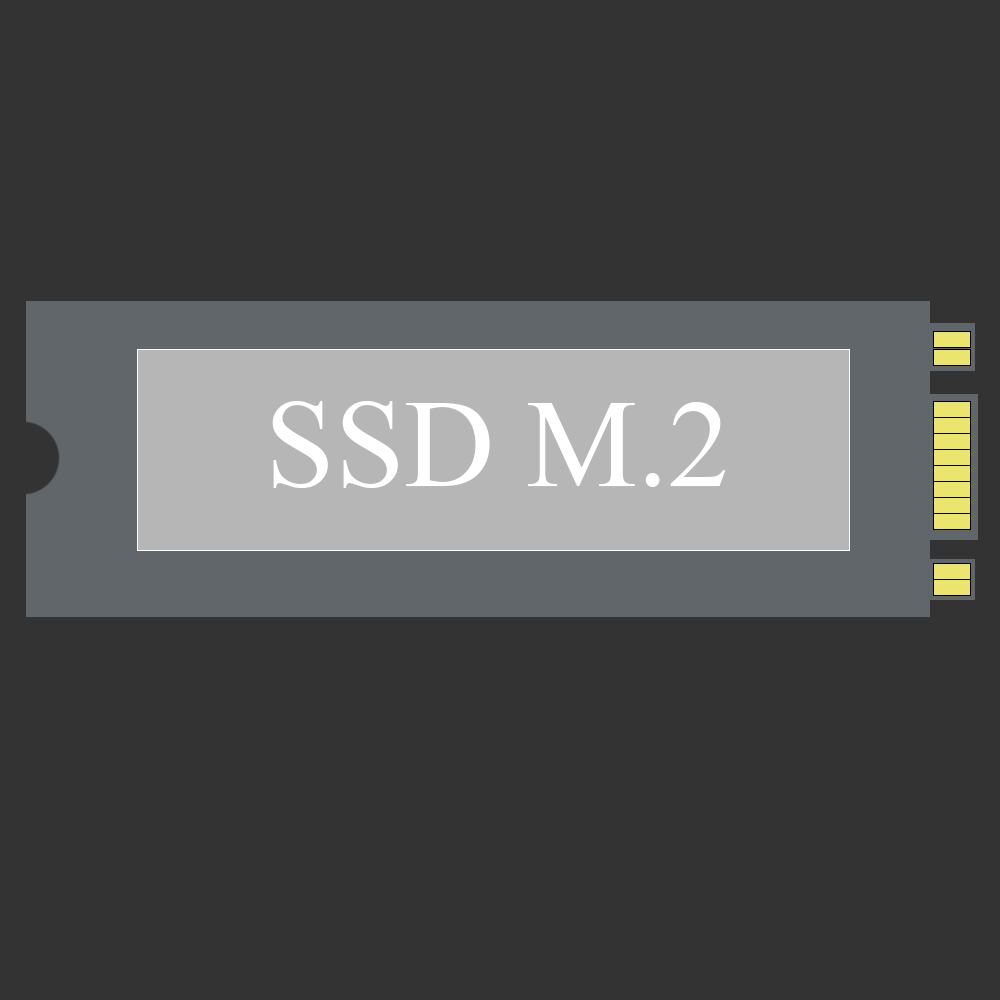
<style>
.page{position:relative;width:1000px;height:1000px;background:#333333}
.page>*{position:absolute;margin:0}
.t1{font:125px "TimesNewRomanPSMT";color:#ffffff}
</style>
<div class="page">
<p class="t1" style="left:272px;top:401px;width:454px;height:87px">SSD M.2</p>
</div>
